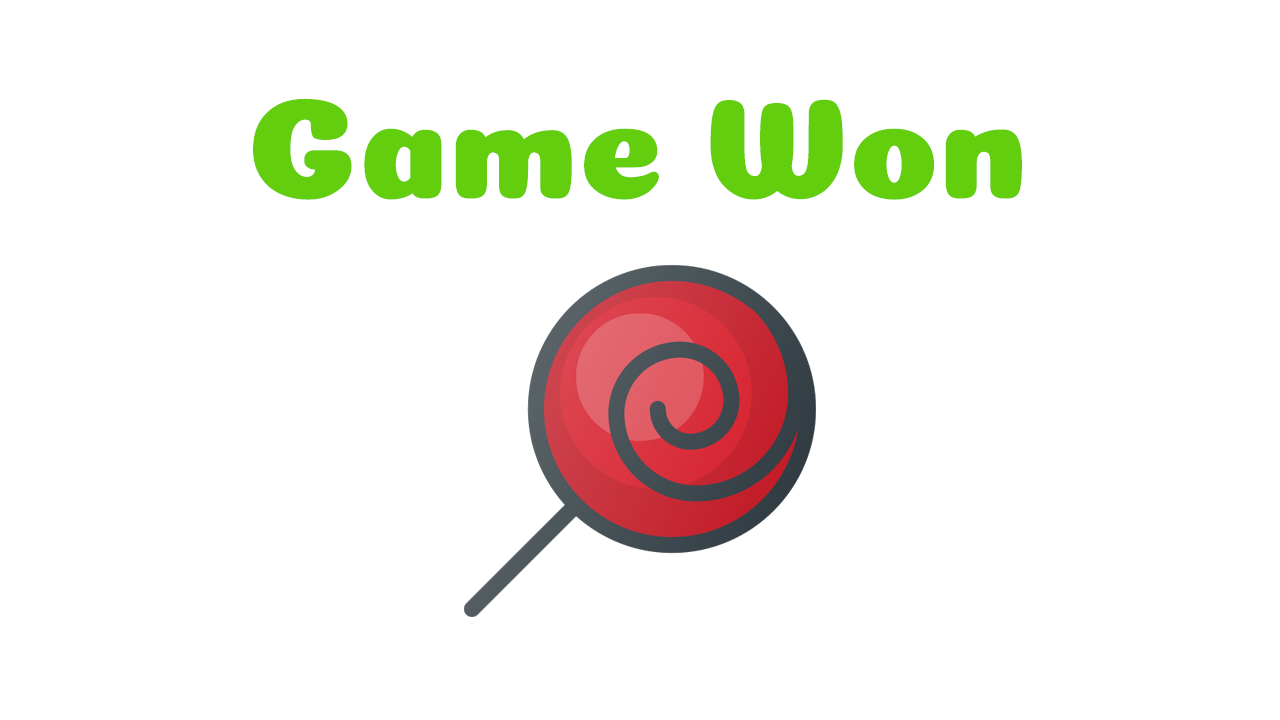
<style>
.page{position:relative;width:1280px;height:720px;background:#ffffff}
.page>*{position:absolute;margin:0}
.t1{font:144px "Coiny-Regular";color:#63ce0d}
</style>
<div class="page">
<p class="t1" style="left:253px;top:98px;width:769px;height:102px">Game Won</p>
</div>
